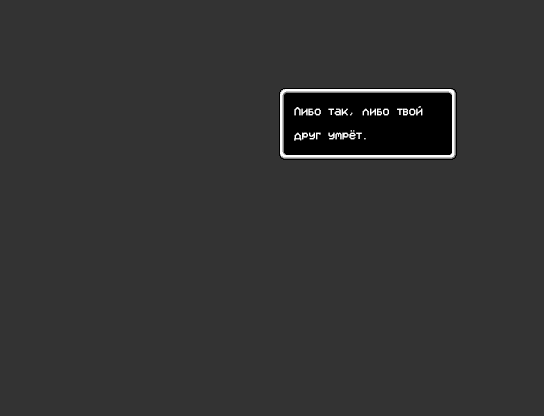
<style>
.page{position:relative;width:544px;height:416px;background:#333333}
.page>*{position:absolute;margin:0}
.t1{font:12px/24px "VCROSDMono";color:#ffffff}
</style>
<div class="page">
<p class="t1" style="left:294px;top:106px;width:129px;height:35px">Либо так, либо твой<br>друг умрёт.</p>
</div>
